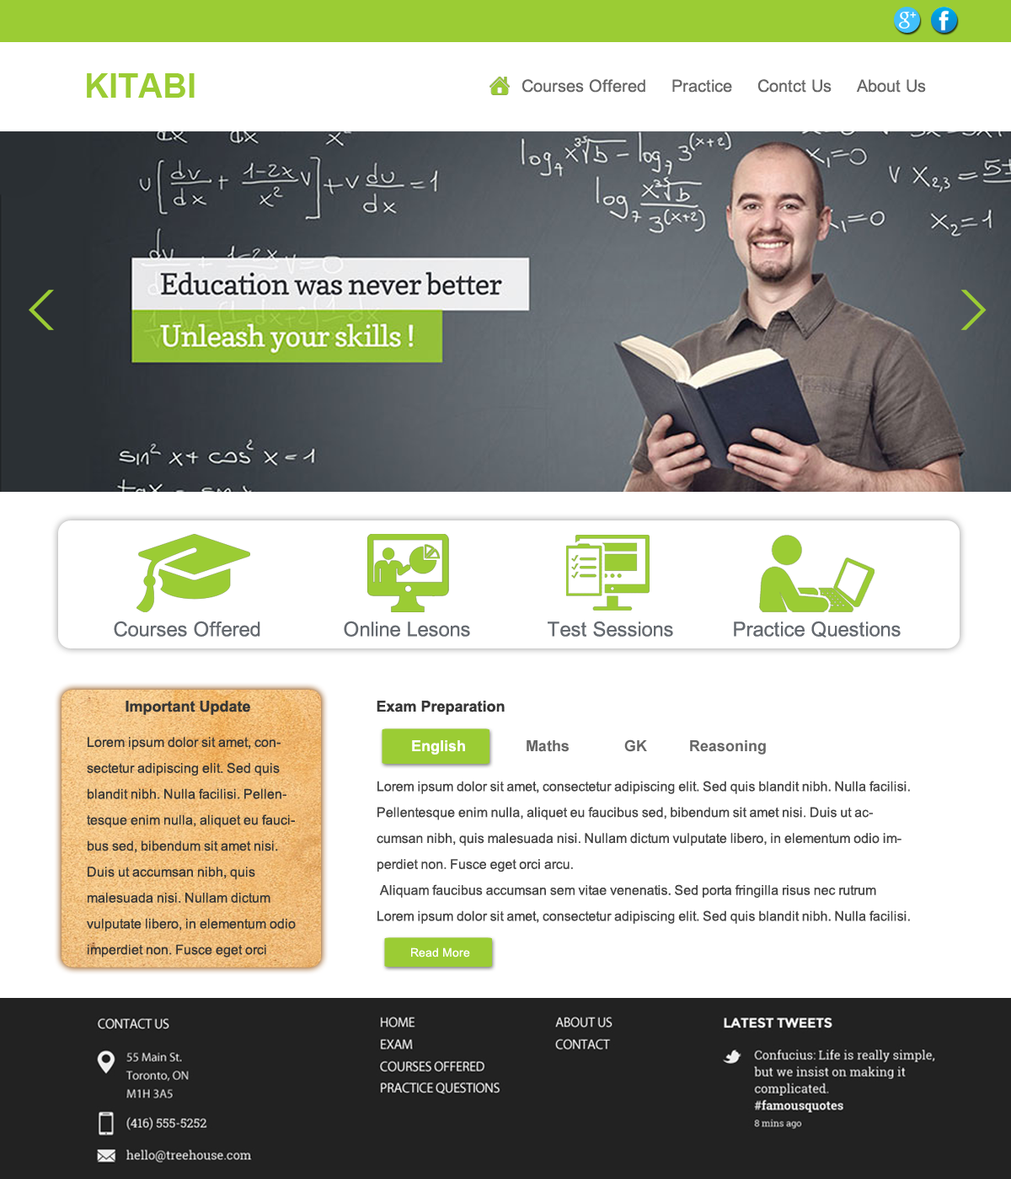
<style>
.page{position:relative;width:1011px;height:1179px;background:#ffffff}
.page>*{position:absolute;margin:0}
.t1{font:33.7px "Arial-BoldMT";color:#9bcc34}
.t2{font:16.8px "ArialMT";color:#666666}
.t3{font:20.2px "ArialMT";color:#64696f}
.t4{font:15.2px "Arial-BoldMT";color:#363636}
.t5{font:13.5px/25.9px "ArialMT";color:#363636}
.t6{font:15.2px "Arial-BoldMT";color:#ffffff}
.t7{font:15.2px "Arial-BoldMT";color:#666666}
.t8{font:13.5px/25.9px "ArialMT";color:#444444}
.t9{font:11.8px "ArialMT";color:#ffffff}
</style>
<div class="page">
<p class="t1" style="left:87px;top:73px;width:108px;height:25px">KITABI</p>
<p class="t2" style="left:522px;top:79px;width:404px;height:14px">Courses Offered     Practice     Contct Us     About Us</p>
<p class="t3" style="left:114px;top:621px;width:787px;height:17px">Courses Offered              Online Lesons             Test Sessions          Practice Questions</p>
<p class="t4" style="left:126px;top:701px;width:124px;height:14px">Important Update</p>
<p class="t4" style="left:377px;top:701px;width:128px;height:14px">Exam Preparation</p>
<p class="t5" style="left:87px;top:737px;width:209px;height:221px">Lorem ipsum dolor sit amet, consectetur adipiscing elit. Sed quis blandit nibh. Nulla facilisi. Pellentesque enim nulla, aliquet eu faucibus sed, bibendum sit amet nisi. Duis ut accumsan nibh, quis malesuada nisi. Nullam dictum vulputate libero, in elementum odio imperdiet non. Fusce eget orci arcu. Aliquam faucibus accumsan sem vitae venenatis. Sed porta fringilla risus nec rutrum</p>
<p class="t6" style="left:412px;top:741px;width:53px;height:14px">English</p>
<p class="t7" style="left:527px;top:740px;width:239px;height:15px">Maths             GK          Reasoning</p>
<p class="t8" style="left:377px;top:781px;width:533px;height:143px">Lorem ipsum dolor sit amet, consectetur adipiscing elit. Sed quis blandit nibh. Nulla facilisi. Pellentesque enim nulla, aliquet eu faucibus sed, bibendum sit amet nisi. Duis ut accumsan nibh, quis malesuada nisi. Nullam dictum vulputate libero, in elementum odio imperdiet non. Fusce eget orci arcu.<br> Aliquam faucibus accumsan sem vitae venenatis. Sed porta fringilla risus nec rutrum Lorem ipsum dolor sit amet, consectetur adipiscing elit. Sed quis blandit nibh. Nulla facilisi. Pellentesque enim nulla, aliquet eu faucibus sed, bibendum sit amet nisi. Duis ut accumsan nibh.</p>
<p class="t9" style="left:411px;top:948px;width:59px;height:10px">Read More</p>
</div>
